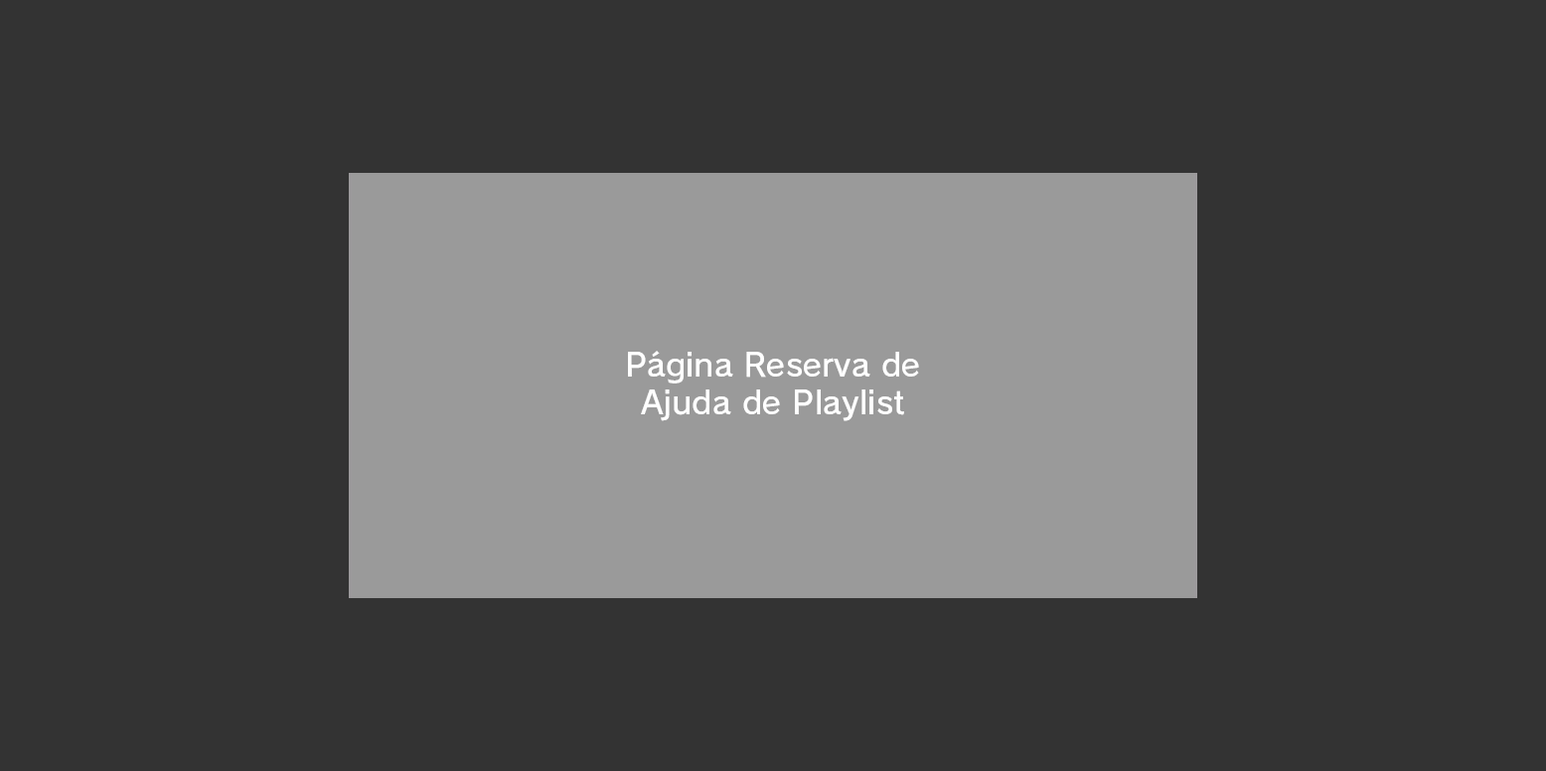
<style>
.page{position:relative;width:1546px;height:771px;background:#333333}
.page>*{position:absolute;margin:0}
.t1{font:31.8px "RodinNTLGPro-DB";color:#ffffff}
</style>
<div class="page">
<p class="t1" style="left:628px;top:351px;width:291px;height:70px;text-align:center">Página Reserva de<br>Ajuda de Playlist</p>
</div>
